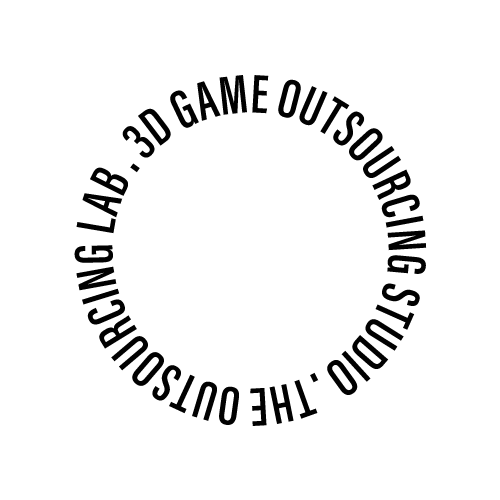
<style>
.page{position:relative;width:500px;height:500px;background:#ffffff}
.page>*{position:absolute;margin:0}
.t1{font:56px/70.7px "AcuminConcept-ExtraCondensedSemibold";color:#010101}
</style>
<div class="page">
<p class="t1" style="left:74px;top:75px;width:353px;height:351px;text-align:center">THE OUTSOURCING LAB . 3D GAME OUTSOURCING STUDIO .</p>
</div>
